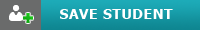
<style>
.page{position:relative;width:200px;height:30px}
.page>*{position:absolute;margin:0}
.t1{font:14px "Tahoma-Bold";letter-spacing:0.04em;color:#ffffff}
</style>
<div class="page">
<p class="t1" style="left:60px;top:9px;width:113px;height:10px">SAVE STUDENT</p>
</div>
